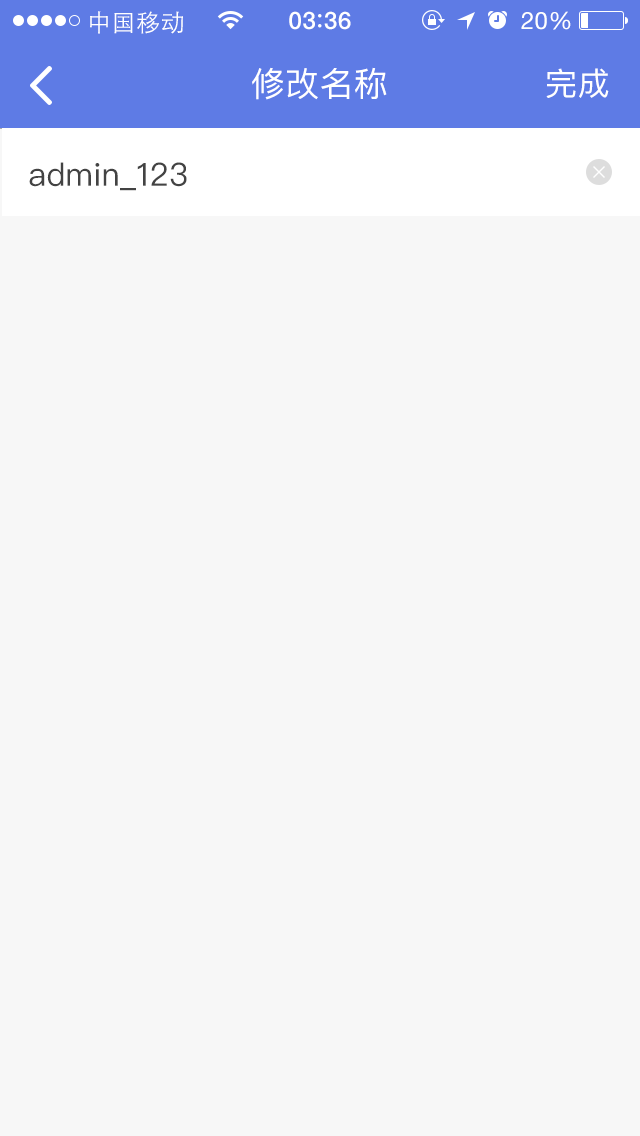
<style>
.page{position:relative;width:640px;height:1136px;background:#f7f7f7}
.page>*{position:absolute;margin:0}
.t1{font:24px "STHeitiSC-Light";letter-spacing:0.02em;color:#ffffff}
.t2{font:24px "HelveticaNeue-Medium";letter-spacing:0.03em;color:#ffffff}
.t3{font:24px "HelveticaNeue";letter-spacing:0.02em;color:#ffffff}
.t4{font:34px "PingFangSC-Regular";letter-spacing:0.01em;color:#ffffff}
.t5{font:32px "PingFangSC-Regular";letter-spacing:0.01em;color:#ffffff}
.t6{font:32px "PingFangSC-Regular";letter-spacing:0.01em;color:#434343}
</style>
<div class="page">
<p class="t1" style="left:90px;top:11px;width:93px;height:23px">中国移动</p>
<p class="t2" style="left:289px;top:11px;width:62px;height:19px">03 36</p>
<p class="t3" style="left:521px;top:11px;width:50px;height:19px">20%</p>
<p class="t4" style="left:252px;top:67px;width:135px;height:33px">修改名称</p>
<p class="t5" style="left:546px;top:68px;width:63px;height:30px">完成</p>
<p class="t6" style="left:29px;top:162px;width:158px;height:29px">admin_123</p>
</div>
